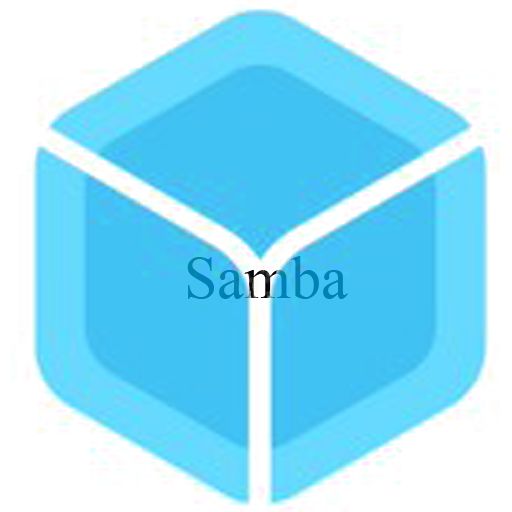
<style>
.page{position:relative;width:512px;height:512px;background:#ffffff}
.page>*{position:absolute;margin:0}
.t1{font:60px "TimesNewRomanPSMT";color:#0082b2}
</style>
<div class="page">
<p class="t1" style="left:187px;top:256px;width:161px;height:43px">Samba</p>
</div>
